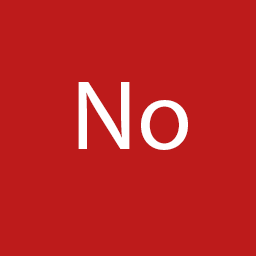
<style>
.page{position:relative;width:256px;height:256px;background:#bd1b1b}
.page>*{position:absolute;margin:0}
.t1{font:100px "MyriadPro-Regular";color:#ffffff}
</style>
<div class="page">
<p class="t1" style="left:78px;top:82px;width:110px;height:68px">No</p>
</div>
